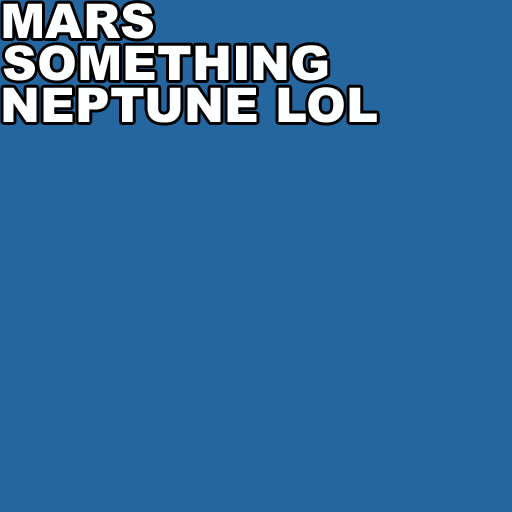
<style>
.page{position:relative;width:512px;height:512px;background:#25669e}
.page>*{position:absolute;margin:0}
.t1{font:48px "Arial-Black";color:#feffff}
</style>
<div class="page">
<p class="t1" style="left:3px;top:3px;width:150px;height:36px">MARS</p>
<p class="t1" style="left:3px;top:45px;width:325px;height:36px">SOMETHING</p>
<p class="t1" style="left:3px;top:87px;width:374px;height:36px">NEPTUNE LOL</p>
</div>
